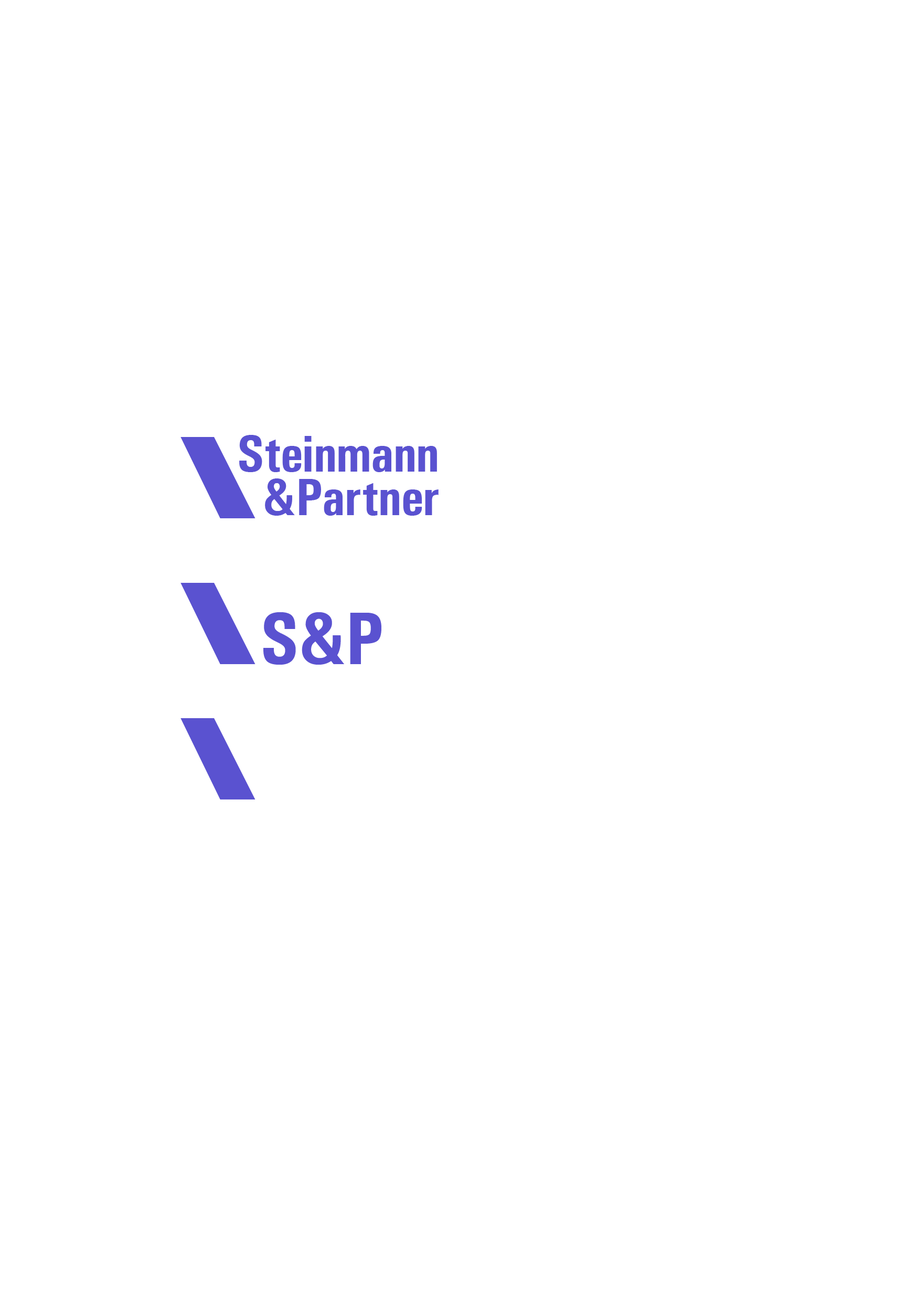
<style>
.page{position:relative;width:917px;height:1301px;background:#ffffff}
.page>*{position:absolute;margin:0}
.t1{font:52.4px/43.7px "Univers-Condensed-Bold";color:#5a52d0}
.t2{font:74.3px "Univers-Condensed-Bold";color:#5a52d0}
</style>
<div class="page">
<p class="t1" style="left:239px;top:435px;width:199px;height:81px;text-align:right">Steinmann<br>&amp;Partner</p>
<p class="t2" style="left:263px;top:612px;width:118px;height:53px">S&amp;P</p>
</div>
